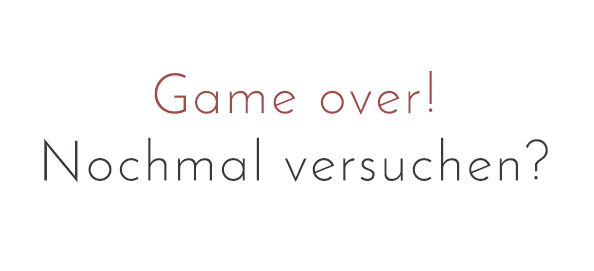
<style>
.page{position:relative;width:594px;height:271px;background:#ffffff}
.page>*{position:absolute;margin:0}
.t1{font:56px "JosefinSans-Light";letter-spacing:0.075em;color:#363940}
.t2{font:56px "JosefinSans-Light";letter-spacing:0.075em;color:#a04a49}
</style>
<div class="page">
<p class="t1" style="left:44px;top:71px;width:504px;height:112px;text-align:center"><span class="t2">Game over!<br></span>Nochmal versuchen?</p>
</div>
